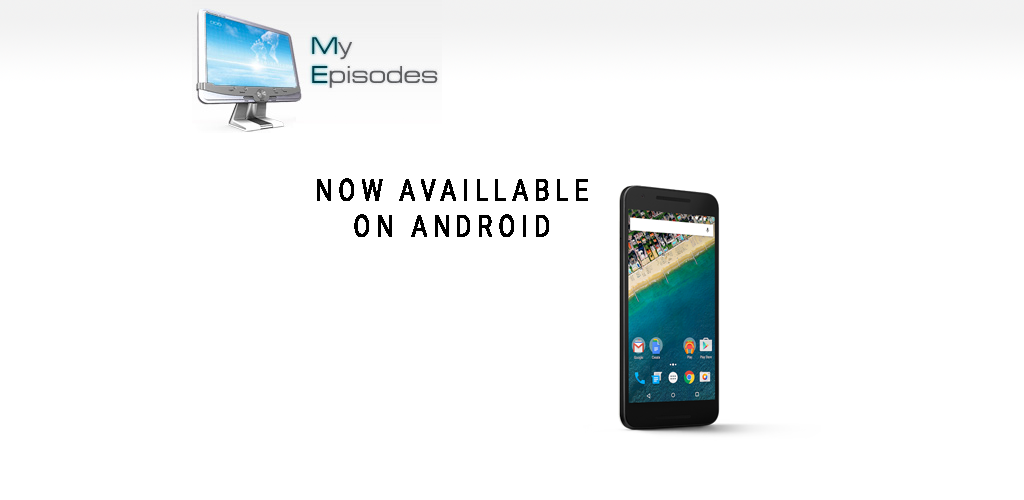
<style>
.page{position:relative;width:1024px;height:500px;background:#ffffff}
.page>*{position:absolute;margin:0}
.t1{font:30px "Roboto-Regular";letter-spacing:0.2em;color:#000000;font-weight:bold;scale:0.8 1}
</style>
<div class="page">
<p class="t1" style="left:317px;top:178px;width:271px;height:59px;text-align:center">NOW AVAILLABLE<br>ON ANDROID</p>
</div>
